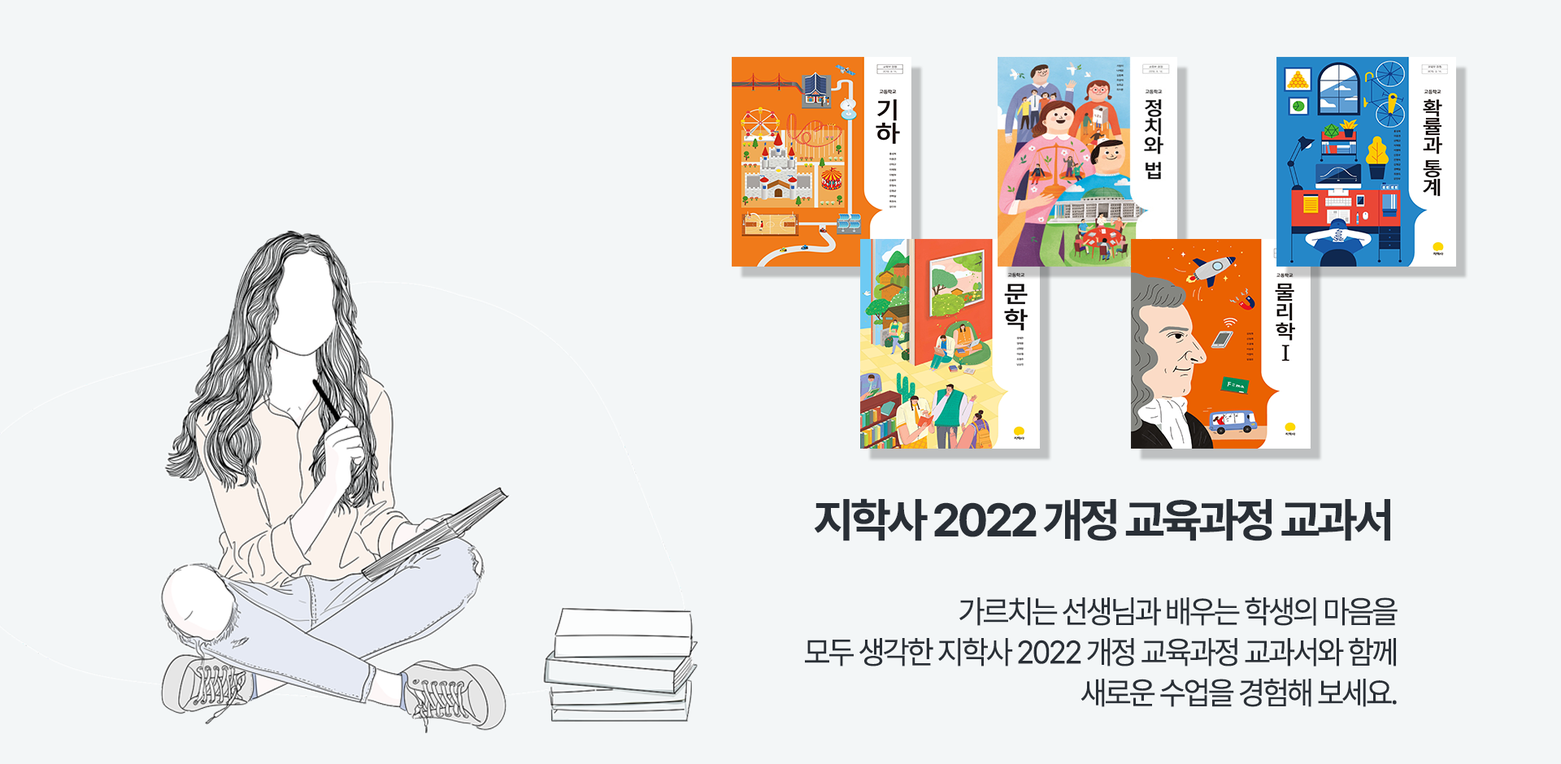
<style>
.page{position:relative;width:1561px;height:764px;background:#f3f6f7}
.page>*{position:absolute;margin:0}
.t1{font:46.5px "PretendardVariable-Bold";letter-spacing:-0.065em;color:#292f36}
.t2{font:32.2px/40.6px "PretendardVariable-Regular";letter-spacing:-0.065em;color:#292f36;scale:0.95 1}
</style>
<div class="page">
<p class="t1" style="left:814px;top:498px;width:576px;height:43px">지학사 2022 개정 교육과정 교과서</p>
<p class="t2" style="left:805px;top:597px;width:592px;height:110px;text-align:right">가르치는 선생님과 배우는 학생의 마음을<br>모두 생각한 지학사 2022 개정 교육과정 교과서와 함께<br>새로운 수업을 경험해 보세요.</p>
</div>
